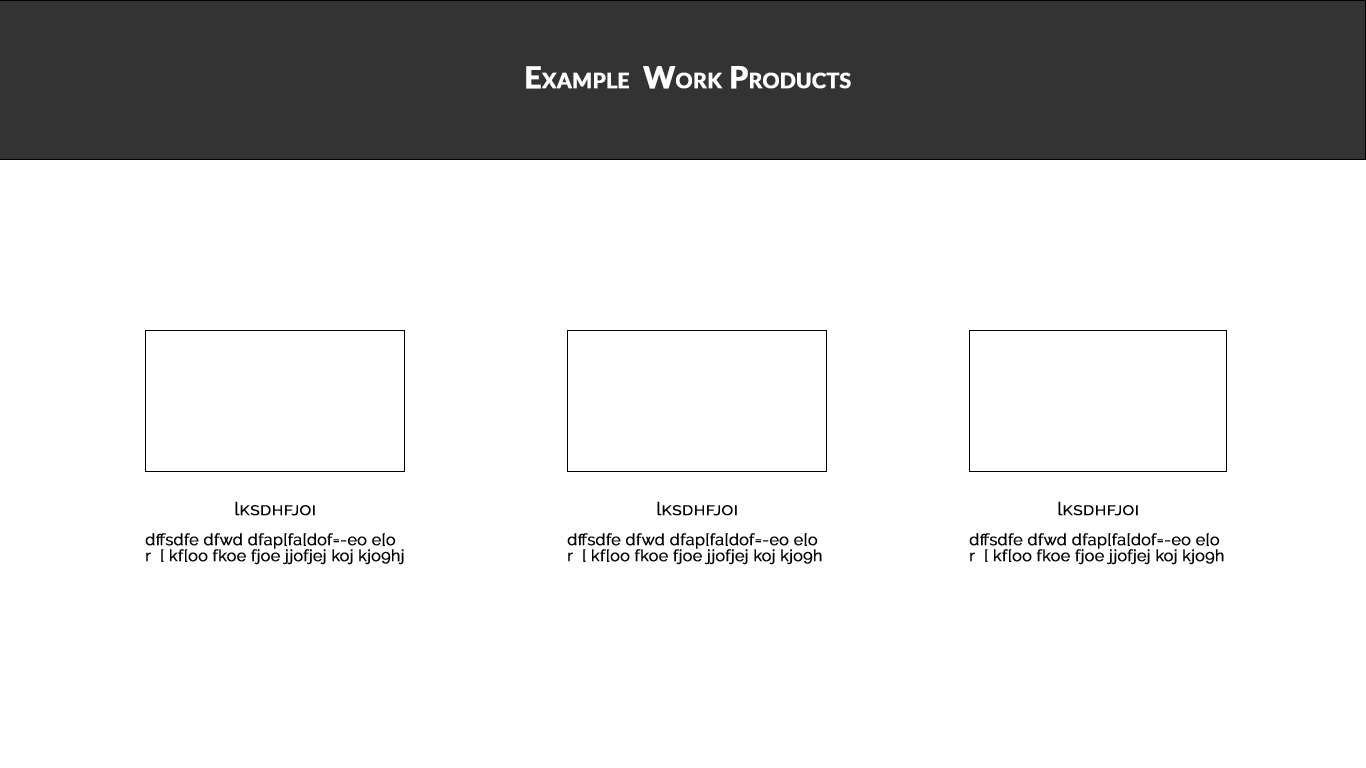
<style>
.page{position:relative;width:1366px;height:768px;background:#ffffff}
.page>*{position:absolute;margin:0}
.t1{font:30px "Lato-Bold";color:#ffffff;font-variant:small-caps;font-weight:bold}
.t2{font:16px/16px "Raleway-Regular";color:#000000;font-weight:bold}
.t3{font:18px/14px "Raleway-Regular";color:#000000;font-weight:bold}
.t4{font:18px/14px "Raleway-Regular";color:#000000;font-variant:small-caps;font-weight:bold}
</style>
<div class="page">
<p class="t1" style="left:526px;top:66px;width:325px;height:23px">Example  Work Products</p>
<p class="t2" style="left:145px;top:501px;width:259px;height:64px;text-align:center"><span class="t3">l</span><span class="t4">ksdhfjoi<br><br></span>dffsdfe dfwd dfap[fa[dof=-eo e[o r  [ kf[oo fkoe fjoe jjofjej koj kjo9hj</p>
<p class="t2" style="left:567px;top:501px;width:255px;height:64px;text-align:center"><span class="t3">l</span><span class="t4">ksdhfjoi<br><br></span>dffsdfe dfwd dfap[fa[dof=-eo e[o r  [ kf[oo fkoe fjoe jjofjej koj kjo9h</p>
<p class="t2" style="left:969px;top:501px;width:255px;height:64px;text-align:center"><span class="t3">l</span><span class="t4">ksdhfjoi<br><br></span>dffsdfe dfwd dfap[fa[dof=-eo e[o r  [ kf[oo fkoe fjoe jjofjej koj kjo9h</p>
</div>
